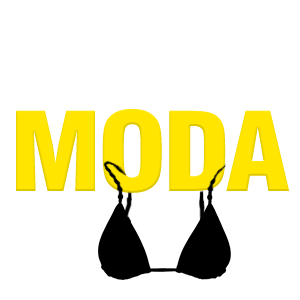
<style>
.page{position:relative;width:300px;height:300px;background:#ffffff}
.page>*{position:absolute;margin:0}
.t1{font:106.2px "Swiss721BT-BlackCondensed";letter-spacing:-0.04em;color:#ffe500;text-transform:uppercase;scale:1.1 1}
</style>
<div class="page">
<p class="t1" style="left:16px;top:109px;width:273px;height:84px">moda</p>
</div>
